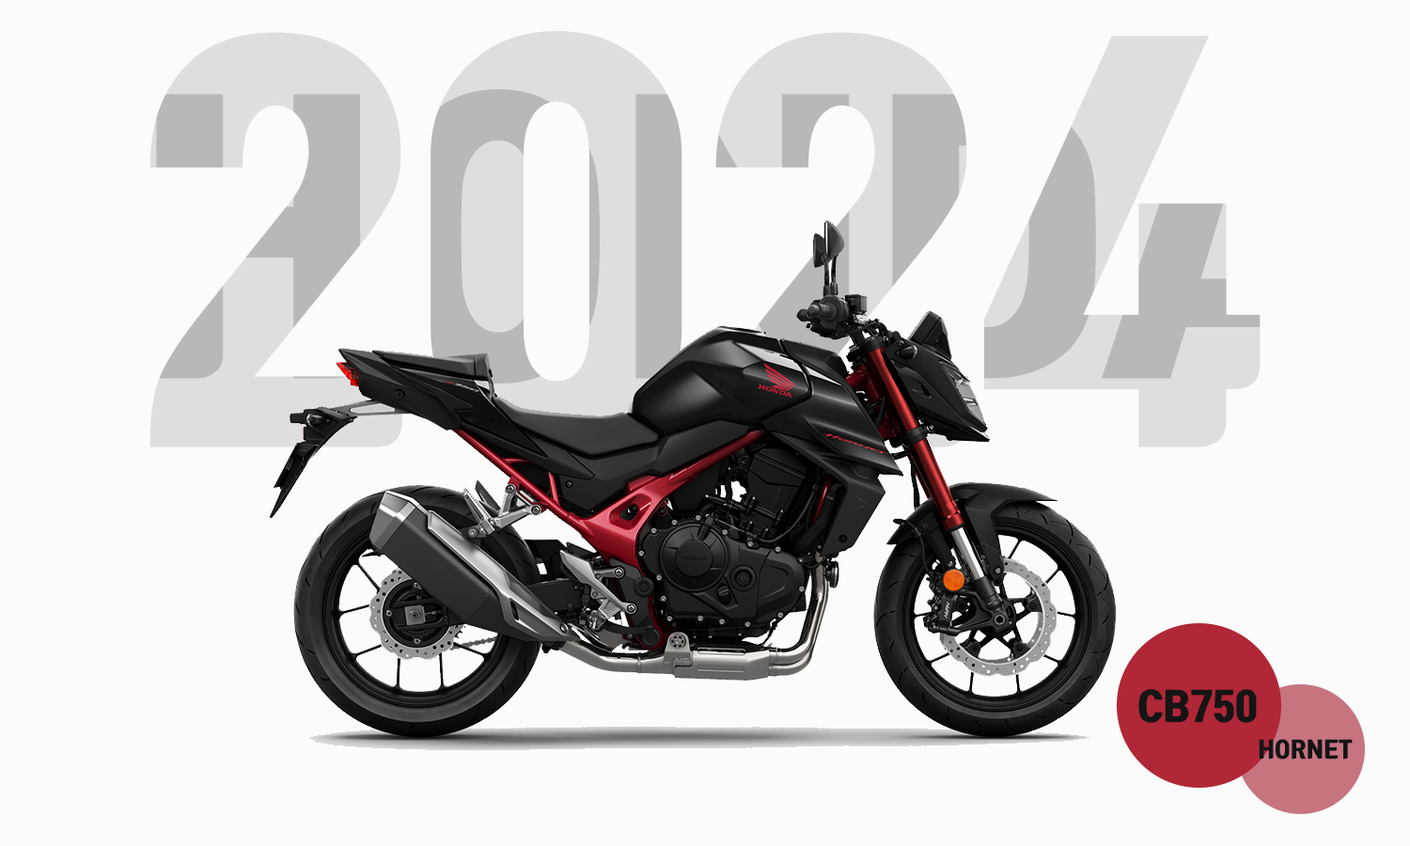
<style>
.page{position:relative;width:1410px;height:846px;background:#fbfbfb}
.page>*{position:absolute;margin:0}
.t1{font:37.6px "TmonMonsoriBlack";color:#151515}
.t2{font:22.1px "TmonMonsoriBlack";color:#151515}
</style>
<div class="page">
<p class="t1" style="left:1138px;top:689px;width:119px;height:34px">CB750</p>
<p class="t2" style="left:1258px;top:739px;width:94px;height:20px">HORNET</p>
</div>
